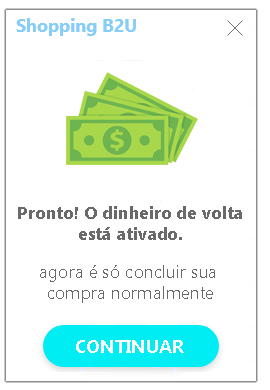
<style>
.page{position:relative;width:270px;height:390px;background:#ffffff}
.page>*{position:absolute;margin:0}
.t1{font:17.4px "MicrosoftTaiLe-Bold";color:#6a6a6a}
.t2{font:17.1px "MicrosoftTaiLe";color:#6a6a6a}
.t3{font:17.9px "Ebrima-Bold";color:#ffffff}
</style>
<div class="page">
<p class="t1" style="left:18px;top:206px;width:224px;height:34px;text-align:center">Pronto! O dinheiro de volta<br>está ativado.</p>
<p class="t2" style="left:40px;top:265px;width:175px;height:38px;text-align:center">agora é só concluir sua <br>compra normalmente</p>
<p class="t3" style="left:76px;top:340px;width:108px;height:13px">CONTINUAR</p>
</div>
